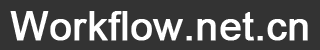
<style>
.page{position:relative;width:320px;height:50px;background:#333333}
.page>*{position:absolute;margin:0}
.t1{font:40px "ArialMT";color:#ffffff;font-weight:bold}
</style>
<div class="page">
<p class="t1" style="left:10px;top:11px;width:298px;height:30px">Workflow.net.cn</p>
</div>
